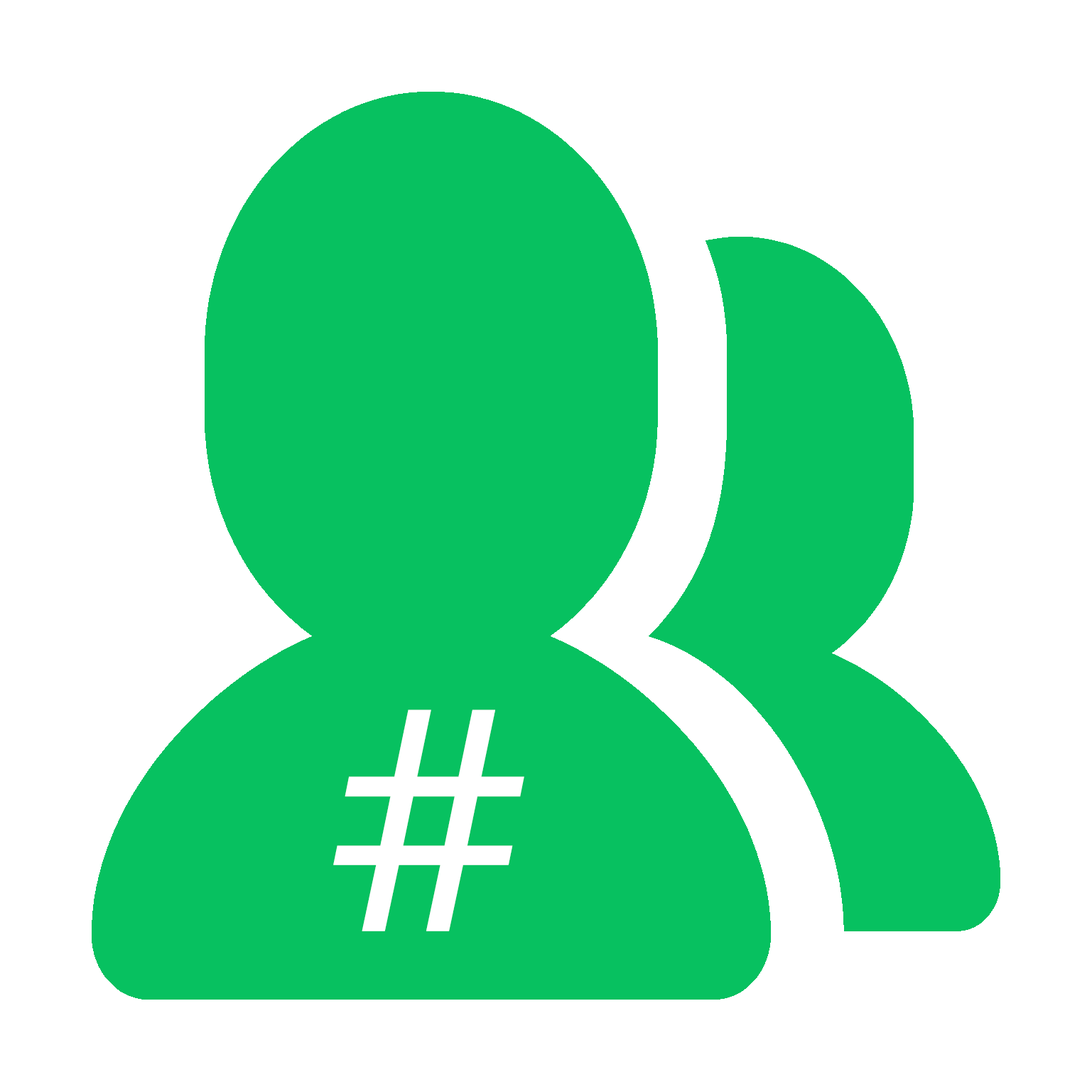
<style>
.page{position:relative;width:1092px;height:1092px;background:#ffffff}
.page>*{position:absolute;margin:0}
.t1{font:319.8px "MicrosoftYaHei";color:#ffffff}
</style>
<div class="page">
<p class="t1" style="left:333px;top:709px;width:191px;height:222px">#</p>
</div>
